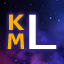
<style>
.page{position:relative;width:64px;height:64px}
.page>*{position:absolute;margin:0}
.t1{font:24.3px "Consolas-Bold";color:#ffae00;scale:1.33 1}
.t2{font:53.6px "Consolas";color:#ffffff;scale:1.37 1}
</style>
<div class="page">
<p class="t1" style="left:9px;top:14px;width:16px;height:16px">K</p>
<p class="t2" style="left:29px;top:14px;width:28px;height:35px">L</p>
<p class="t1" style="left:7px;top:33px;width:18px;height:16px">M</p>
</div>
